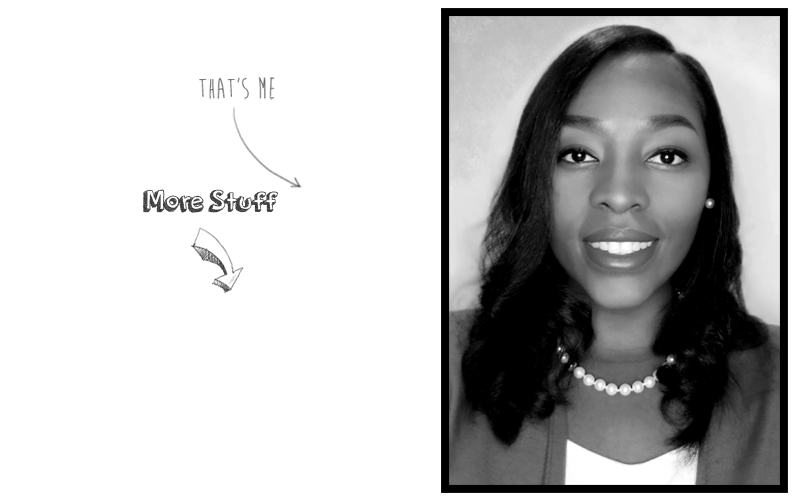
<style>
.page{position:relative;width:800px;height:500px;background:#ffffff}
.page>*{position:absolute;margin:0}
.t1{font:30.2px "BrainFlower";color:#666666}
.t2{font:30.2px "orangejuice";color:#333333}
</style>
<div class="page">
<p class="t1" style="left:199px;top:77px;width:76px;height:23px">That's Me</p>
<p class="t2" style="left:143px;top:189px;width:136px;height:24px">More Stuff</p>
</div>
